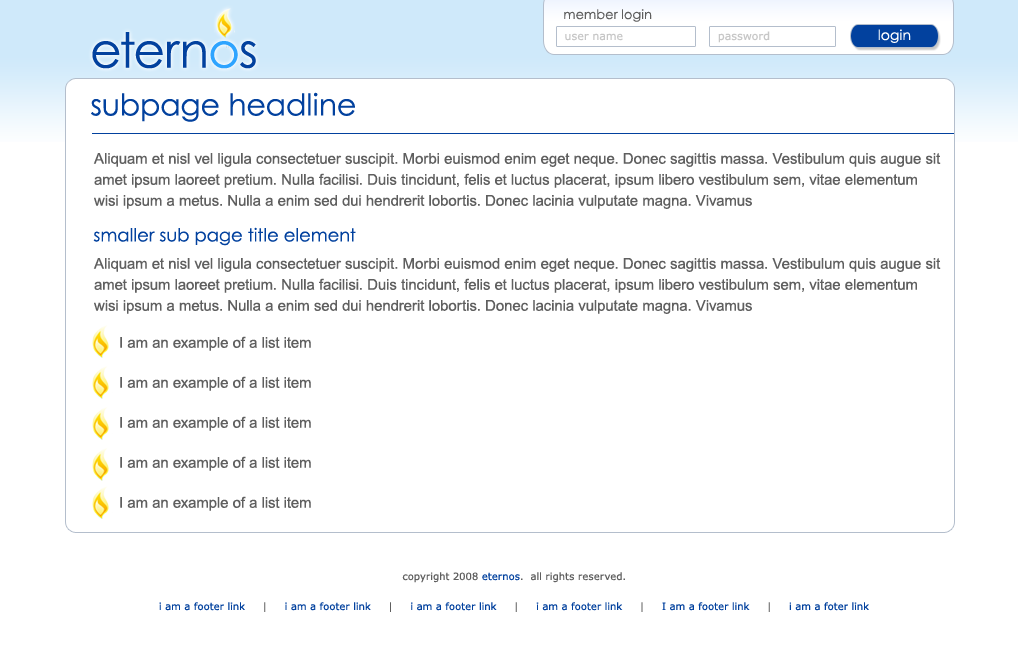
<style>
.page{position:relative;width:1018px;height:648px;background:#ffffff}
.page>*{position:absolute;margin:0}
.t1{font:13px "CenturyGothic";color:#5f5f5f}
.t2{font:14px "CenturyGothic";color:#ffffff}
.t3{font:48.6px "CenturyGothic";color:#02419e}
.t4{font:48.6px "CenturyGothic";color:#2ea4ff}
.t5{font:11px "Verdana";color:#c7c7c7}
.t6{font:30px "CenturyGothic";color:#02419e}
.t7{font:15px/21px "ArialMT";color:#5f5f5f}
.t8{font:18px "CenturyGothic";color:#02419e}
.t9{font:15px/40px "ArialMT";color:#5f5f5f}
.t10{font:10px "Verdana";color:#5f5f5f}
.t11{font:10px "Verdana";color:#02419e}
</style>
<div class="page">
<p class="t1" style="left:564px;top:9px;width:88px;height:13px">member login</p>
<p class="t2" style="left:878px;top:29px;width:33px;height:14px">login</p>
<p class="t3" style="left:92px;top:32px;width:164px;height:37px">etern<span class="t4">o</span>s</p>
<p class="t5" style="left:565px;top:33px;width:58px;height:8px">user name</p>
<p class="t5" style="left:718px;top:31px;width:52px;height:12px">password</p>
<p class="t6" style="left:91px;top:92px;width:264px;height:30px">subpage headline</p>
<p class="t7" style="left:93px;top:153px;width:848px;height:161px">Aliquam et nisl vel ligula consectetuer suscipit. Morbi euismod enim eget neque. Donec sagittis massa. Vestibulum quis augue sit amet ipsum laoreet pretium. Nulla facilisi. Duis tincidunt, felis et luctus placerat, ipsum libero vestibulum sem, vitae elementum wisi ipsum a metus. Nulla a enim sed dui hendrerit lobortis. Donec lacinia vulputate magna. Vivamus <br><br><br>Aliquam et nisl vel ligula consectetuer suscipit. Morbi euismod enim eget neque. Donec sagittis massa. Vestibulum quis augue sit amet ipsum laoreet pretium. Nulla facilisi. Duis tincidunt, felis et luctus placerat, ipsum libero vestibulum sem, vitae elementum wisi ipsum a metus. Nulla a enim sed dui hendrerit lobortis. Donec lacinia vulputate magna. Vivamus</p>
<p class="t8" style="left:93px;top:227px;width:263px;height:19px">smaller sub page title element</p>
<p class="t9" style="left:120px;top:336px;width:191px;height:175px">I am an example of a list item<br>I am an example of a list item<br>I am an example of a list item<br>I am an example of a list item<br>I am an example of a list item</p>
<p class="t10" style="left:402px;top:572px;width:223px;height:11px">copyright 2008 <span class="t11">eternos</span>.  all rights reserved.</p>
<p class="t11" style="left:159px;top:602px;width:710px;height:10px">i am a footer link    <span class="t10"> |    </span> i am a footer link     <span class="t10">|    </span> i am a footer link     <span class="t10">|    </span> i am a footer link     <span class="t10">|     </span>I am a footer link    <span class="t10"> |     </span>i am a foter link</p>
</div>
